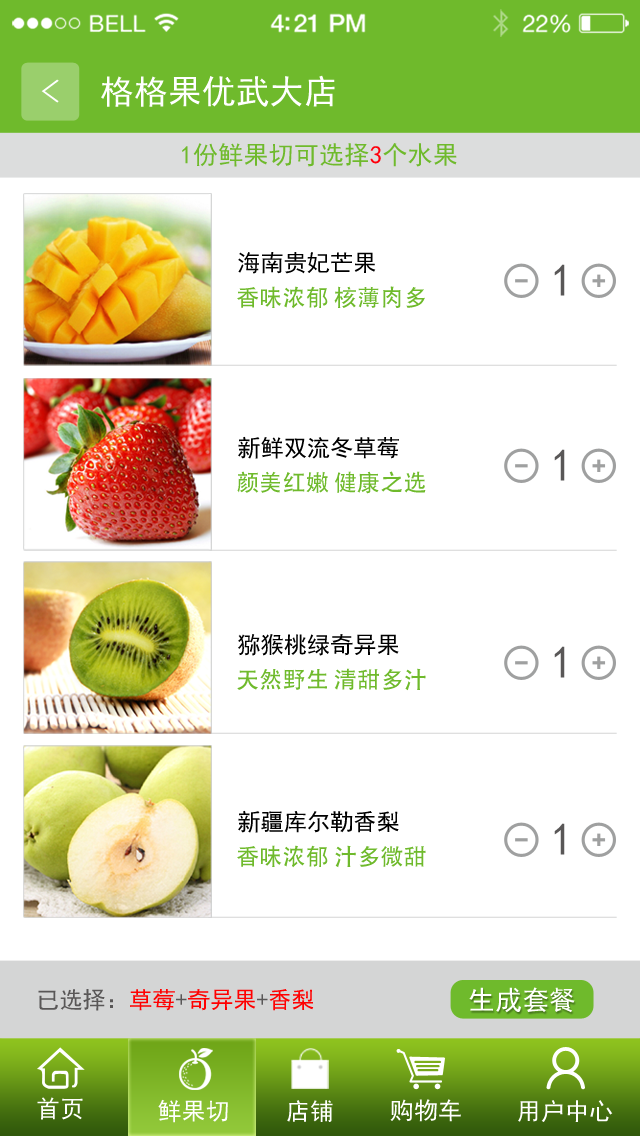
<style>
.page{position:relative;width:640px;height:1136px;background:#ffffff}
.page>*{position:absolute;margin:0}
.t1{font:34px "SimHei";color:#ffffff}
.t2{font:32.3px "SimHei";color:#ffffff;scale:1.23 1}
.t3{font:25.3px "SimHei";color:#6fba2c}
.t4{font:25.3px "SimHei";color:#ff000c}
.t5{font:23.2px "SimHei";color:#000000}
.t6{font:45.4px "SimHei";color:#595757}
.t7{font:23.2px "AdobeHeitiStd-Regular";color:#6fba2c}
.t8{font:23.2px "SimHei";color:#595757}
.t9{font:23.2px "SimHei";color:#ff0000}
.t10{font:26.8px "SimHei";color:#ffffff}
.t11{font:24.1px "SimHei";color:#ffffff}
</style>
<div class="page">
<p class="t1" style="left:101px;top:75px;width:234px;height:32px">格格果优武大店</p>
<p class="t2" style="left:41px;top:79px;width:18px;height:24px">&lt;</p>
<p class="t3" style="left:182px;top:143px;width:275px;height:24px">1份鲜果切可选择<span class="t4">3</span>个水果</p>
<p class="t5" style="left:238px;top:252px;width:138px;height:22px">海南贵妃芒果</p>
<p class="t6" style="left:554px;top:264px;width:11px;height:32px">1</p>
<p class="t7" style="left:237px;top:286px;width:188px;height:23px">香味浓郁 核薄肉多</p>
<p class="t5" style="left:238px;top:436px;width:161px;height:23px">新鲜双流冬草莓</p>
<p class="t6" style="left:554px;top:449px;width:11px;height:32px">1</p>
<p class="t7" style="left:237px;top:471px;width:189px;height:23px">颜美红嫩 健康之选</p>
<p class="t5" style="left:238px;top:634px;width:161px;height:22px">猕猴桃绿奇异果</p>
<p class="t6" style="left:554px;top:646px;width:11px;height:32px">1</p>
<p class="t7" style="left:237px;top:668px;width:189px;height:23px">天然野生 清甜多汁</p>
<p class="t5" style="left:238px;top:810px;width:161px;height:23px">新疆库尔勒香梨</p>
<p class="t6" style="left:554px;top:823px;width:11px;height:32px">1</p>
<p class="t7" style="left:237px;top:845px;width:189px;height:23px">香味浓郁 汁多微甜</p>
<p class="t8" style="left:38px;top:989px;width:276px;height:22px">已选择：<span class="t9">草莓</span>+<span class="t9">奇异果</span>+<span class="t9">香梨</span></p>
<p class="t10" style="left:469px;top:987px;width:106px;height:26px">生成套餐</p>
<p class="t11" style="left:37px;top:1097px;width:46px;height:23px">首页</p>
<p class="t11" style="left:158px;top:1099px;width:70px;height:24px">鲜果切</p>
<p class="t11" style="left:287px;top:1100px;width:46px;height:22px">店铺</p>
<p class="t11" style="left:390px;top:1099px;width:71px;height:23px">购物车</p>
<p class="t11" style="left:518px;top:1100px;width:95px;height:22px">用户中心</p>
</div>
